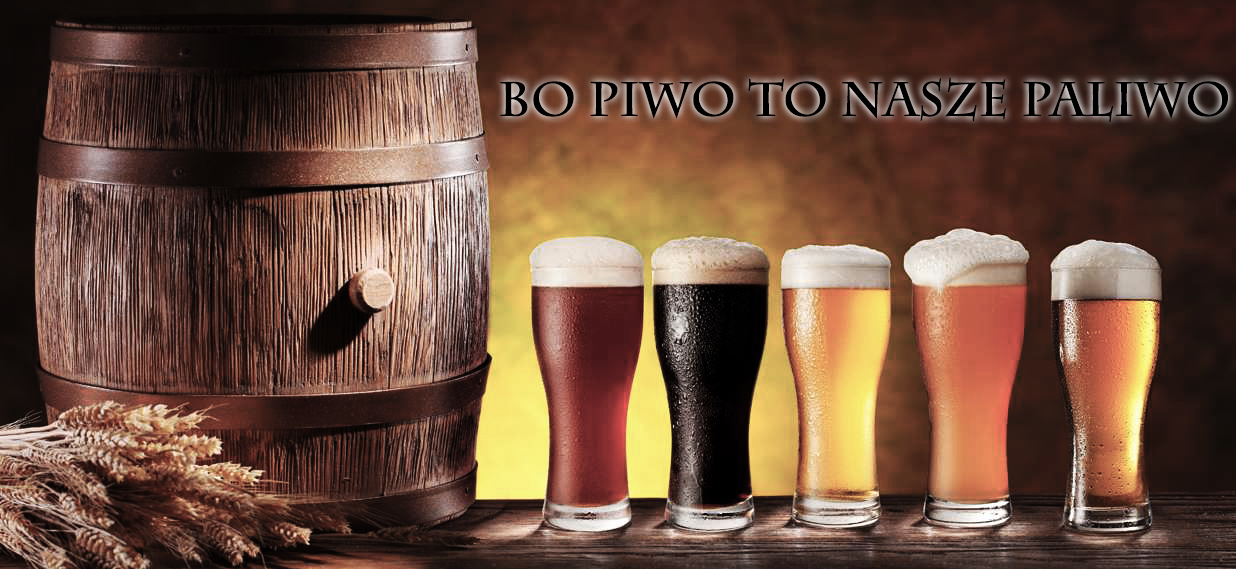
<style>
.page{position:relative;width:1236px;height:569px}
.page>*{position:absolute;margin:0}
.t1{font:48px "CharlemagneStd-Bold";color:#000000}
</style>
<div class="page">
<p class="t1" style="left:500px;top:77px;width:728px;height:45px">Bo piwo to nasze paliwo</p>
</div>
